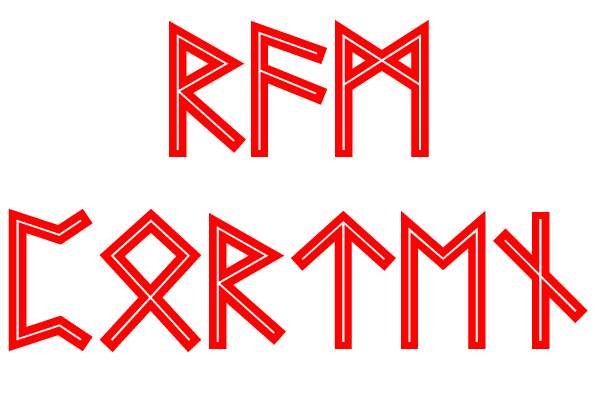
<style>
.page{position:relative;width:600px;height:400px;background:#ffffff}
.page>*{position:absolute;margin:0}
.t1{font:159.7px "FutharkAOEInline";color:#ff0101}
</style>
<div class="page">
<p class="t1" style="left:8px;top:20px;width:580px;height:332px;text-align:center">Ram<br>Porten</p>
</div>
